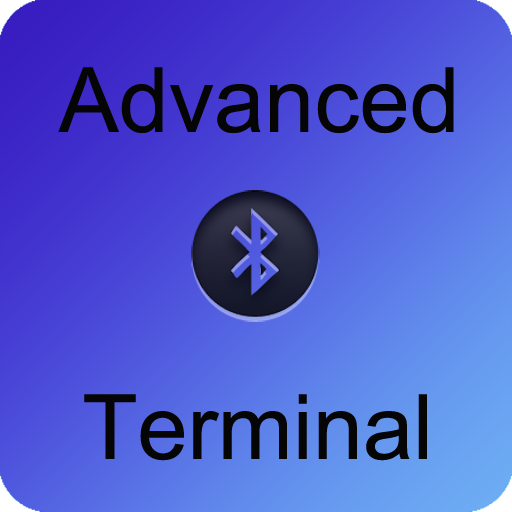
<style>
.page{position:relative;width:512px;height:512px}
.page>*{position:absolute;margin:0}
.t1{font:90.2px "ArialMT";color:#060606}
</style>
<div class="page">
<p class="t1" style="left:58px;top:67px;width:396px;height:67px">Advanced</p>
<p class="t1" style="left:84px;top:394px;width:343px;height:67px">Terminal</p>
</div>
